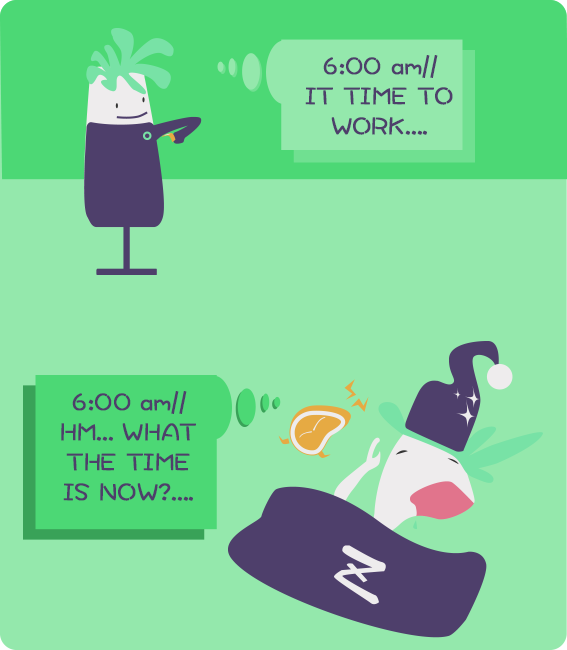
<style>
.page{position:relative;width:567px;height:650px;background:#94e8ac}
.page>*{position:absolute;margin:0}
.t1{font:25px "DFWaWaSC-W5";color:#4e3f6b;font-weight:bold}
</style>
<div class="page">
<p class="t1" style="left:305px;top:55px;width:148px;height:80px;text-align:center">6:00 am//<br>IT TIME TO WORK....</p>
<p class="t1" style="left:61px;top:391px;width:135px;height:110px;text-align:center">6:00 am//<br>HM... WHAT THE TIME IS NOW?....</p>
</div>
